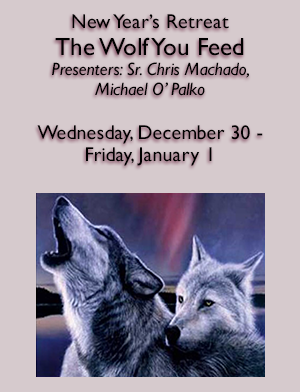
<style>
.page{position:relative;width:300px;height:392px;background:#d6cacd}
.page>*{position:absolute;margin:0}
.t1{font:18px/20px "GillSans-Italic";color:#000000}
.t2{font:20px/27px "GillSans";color:#000000}
.t3{font:25px/27px "GillSans";color:#000000}
.t4{font:20px/22px "GillSans";color:#000000}
</style>
<div class="page">
<p class="t1" style="left:37px;top:14px;width:226px;height:152px;text-align:center"><span class="t2">New Year’s Retreat<br></span><span class="t3">The Wolf You Feed<br></span>Presenters: Sr. Chris Machado, <br>Michael O’ Palko<br><br><span class="t4">Wednesday, December 30 - <br>Friday, January 1</span></p>
</div>
